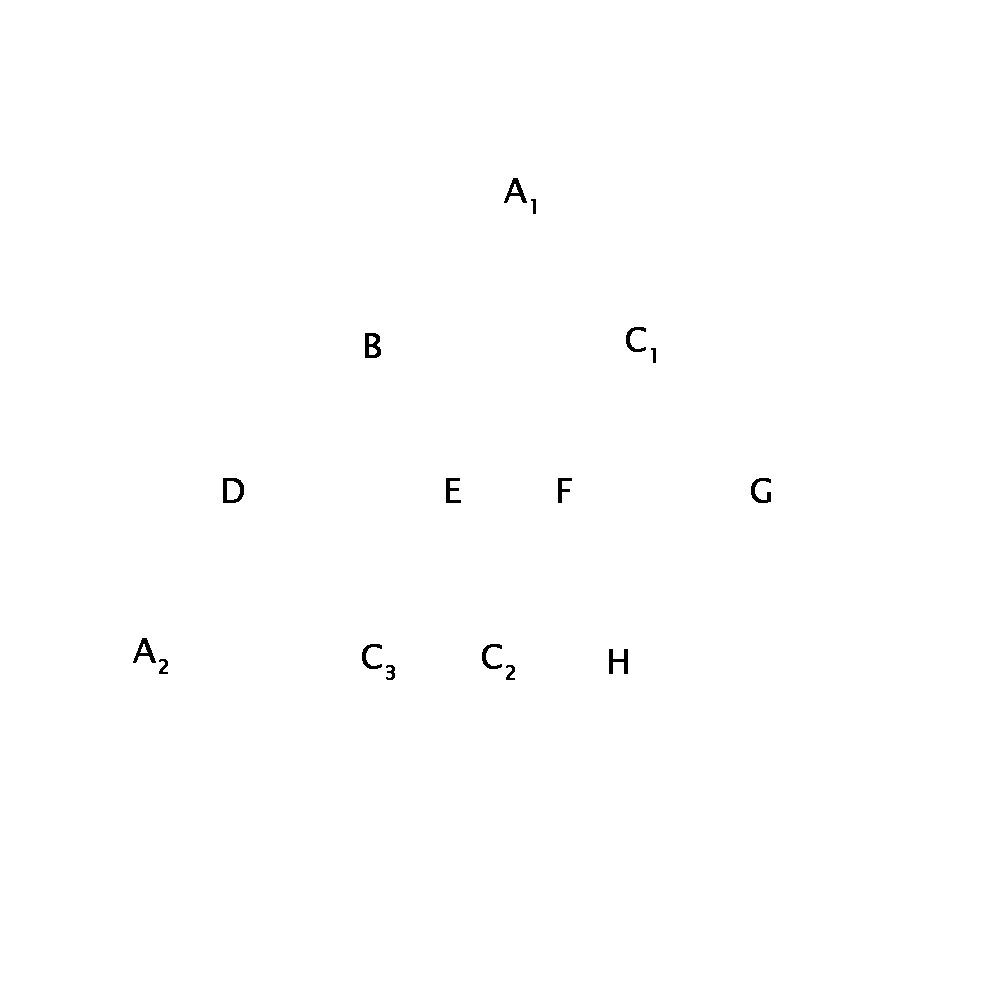
<style>
.page{position:relative;width:1000px;height:1000px;background:#ffffff}
.page>*{position:absolute;margin:0}
.t1{font:12px "LucidaSansUnicode";color:#000000;font-weight:bold}
</style>
<div class="page">
<p class="t1" style="left:504px;top:178px;width:32px;height:36px;text-align:center">A1</p>
<p class="t1" style="left:626px;top:327px;width:30px;height:36px;text-align:center">C1</p>
<p class="t1" style="left:365px;top:333px;width:16px;height:25px;text-align:center">B</p>
<p class="t1" style="left:223px;top:478px;width:21px;height:25px;text-align:center">D</p>
<p class="t1" style="left:446px;top:478px;width:15px;height:25px;text-align:center">E</p>
<p class="t1" style="left:558px;top:478px;width:14px;height:25px;text-align:center">F</p>
<p class="t1" style="left:751px;top:478px;width:20px;height:25px;text-align:center">G</p>
<p class="t1" style="left:133px;top:638px;width:35px;height:36px;text-align:center">A2</p>
<p class="t1" style="left:362px;top:644px;width:33px;height:36px;text-align:center">C3</p>
<p class="t1" style="left:482px;top:644px;width:33px;height:36px;text-align:center">C2</p>
<p class="t1" style="left:609px;top:649px;width:19px;height:25px;text-align:center">H</p>
</div>
